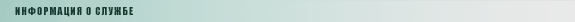
<style>
.page{position:relative;width:575px;height:22px}
.page>*{position:absolute;margin:0}
.t1{font:10px "Impact";letter-spacing:0.1em;color:#183b31}
</style>
<div class="page">
<p class="t1" style="left:15px;top:7px;width:118px;height:10px">ИНФОРМАЦИЯ О СЛУЖБЕ</p>
</div>
